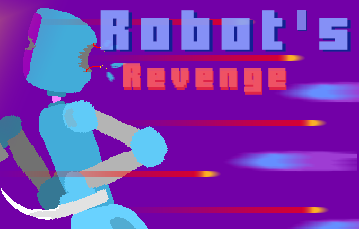
<style>
.page{position:relative;width:359px;height:229px;background:#7200a7}
.page>*{position:absolute;margin:0}
.t1{font:40px "MinercraftoryRegular";letter-spacing:0.2em;color:#87a0ff;font-weight:bold}
.t2{font:40px "MinercraftoryRegular";letter-spacing:0.2em;color:#8590f6;font-weight:bold}
.t3{font:24px "MinercraftoryRegular";letter-spacing:0.2em;color:#ff6060;font-weight:bold}
.t4{font:24px "MinercraftoryRegular";letter-spacing:0.2em;color:#ef5264;font-weight:bold}
</style>
<div class="page">
<p class="t1" style="left:100px;top:10px;width:248px;height:40px">Robot s</p>
<p class="t2" style="left:104px;top:12px;width:247px;height:40px">Robot s</p>
<p class="t3" style="left:123px;top:63px;width:163px;height:29px;opacity:0.9">Revenge</p>
<p class="t4" style="left:124px;top:66px;width:163px;height:29px">Revenge</p>
</div>
